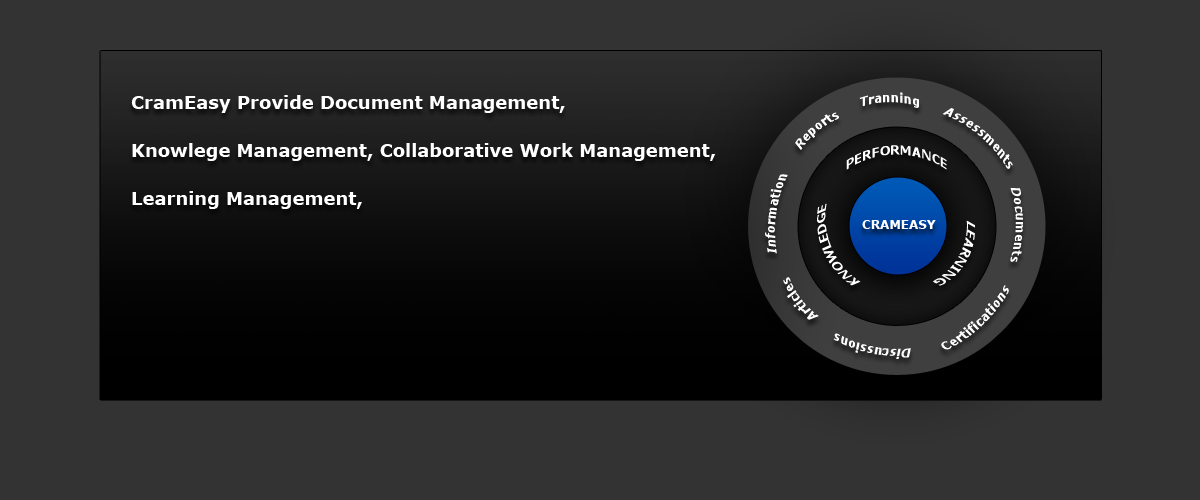
<style>
.page{position:relative;width:1200px;height:500px;background:#333333}
.page>*{position:absolute;margin:0}
.t1{font:18px/48px "Verdana-Bold";color:#ffffff}
.t2{font:12px "Verdana-Bold";color:#ffffff}
.t3{font:12px "Verdana-Bold";color:#fefefe}
.t4{font:12px "Verdana-Bold";color:#fffdfd}
</style>
<div class="page">
<p class="t1" style="left:131px;top:95px;width:585px;height:114px">CramEasy Provide Document Management,<br>Knowlege Management, Collaborative Work Management, <br>Learning Management,</p>
<p class="t2" style="left:859px;top:92px;width:60px;height:16px">Tranning</p>
<p class="t2" style="left:795px;top:112px;width:44px;height:38px;rotate:-39deg">Reports</p>
<p class="t2" style="left:942px;top:108px;width:71px;height:61px;rotate:41deg">Assessments</p>
<p class="t2" style="left:846px;top:145px;width:101px;height:25px">PERFORMANCE</p>
<p class="t2" style="left:765px;top:174px;width:23px;height:80px;rotate:-82deg">Information</p>
<p class="t3" style="left:1010px;top:188px;width:13px;height:74px;rotate:91deg">Documents</p>
<p class="t2" style="left:817px;top:203px;width:44px;height:83px;rotate:-113deg">KNOWLEDGE</p>
<p class="t2" style="left:862px;top:220px;width:74px;height:9px">CRAMEASY</p>
<p class="t2" style="left:933px;top:220px;width:42px;height:66px;rotate:119deg">LEARNING</p>
<p class="t2" style="left:783px;top:277px;width:36px;height:43px;rotate:-127deg">Articles</p>
<p class="t3" style="left:941px;top:285px;width:68px;height:65px;rotate:-43deg">Certifications</p>
<p class="t4" style="left:833px;top:333px;width:78px;height:26px;rotate:-168deg">Discussions</p>
</div>
